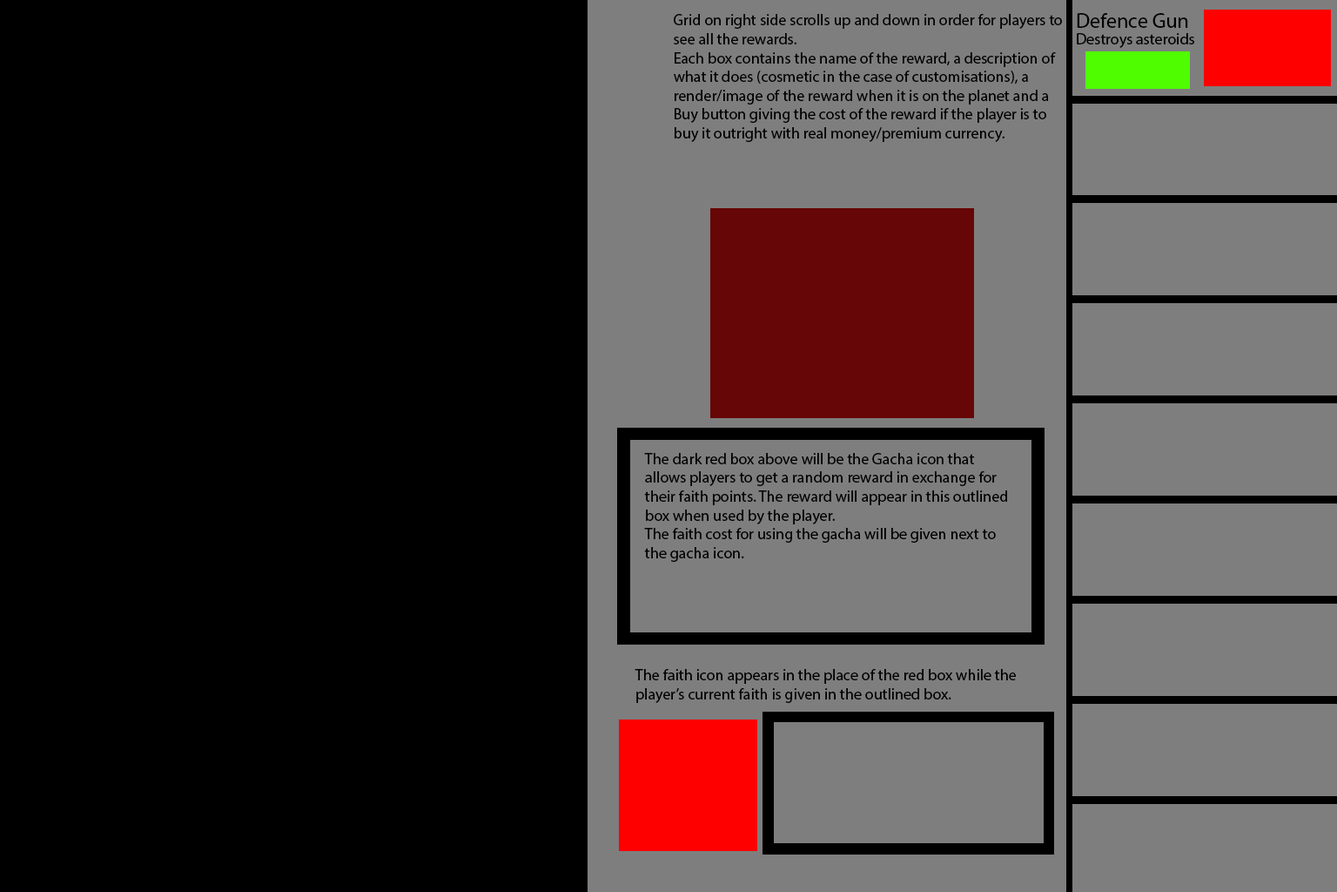
<style>
.page{position:relative;width:1337px;height:892px;background:#000000}
.page>*{position:absolute;margin:0}
.t1{font:15.7px "MyriadPro-Regular";color:#000000}
.t2{font:20.9px "MyriadPro-Regular";color:#000000}
</style>
<div class="page">
<p class="t1" style="left:674px;top:14px;width:388px;height:128px">Grid on right side scrolls up and down in order for players to see all the rewards.<br>Each box contains the name of the reward, a description of what it does (cosmetic in the case of customisations), a render/image of the reward when it is on the planet and a Buy button giving the cost of the reward if the player is to buy it outright with real money/premium currency.</p>
<p class="t2" style="left:1077px;top:13px;width:112px;height:15px">Defence Gun</p>
<p class="t1" style="left:1077px;top:33px;width:118px;height:15px">Destroys asteroids</p>
<p class="t1" style="left:644px;top:453px;width:363px;height:109px">The dark red box above will be the Gacha icon that allows players to get a random reward in exchange for their faith points. The reward will appear in this outlined box when used by the player.<br>The faith cost for using the gacha will be given next to the gacha icon.</p>
<p class="t1" style="left:635px;top:669px;width:381px;height:34px">The faith icon appears in the place of the red box while the player’s current faith is given in the outlined box.</p>
</div>
